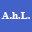
<style>
.page{position:relative;width:32px;height:32px;background:#4262c9}
.page>*{position:absolute;margin:0}
.t1{font:11px "BellMTBold";color:#ffffff}
</style>
<div class="page">
<p class="t1" style="left:1px;top:12px;width:29px;height:7px">A.h.L.</p>
</div>
